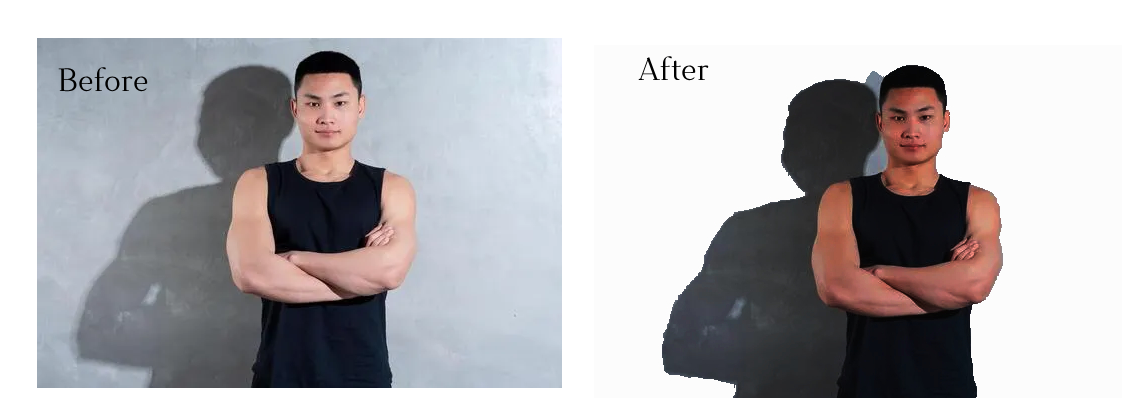
<style>
.page{position:relative;width:1141px;height:413px;background:#fcfcfc}
.page>*{position:absolute;margin:0}
.t1{font:32px "DihjautiS-Regular";color:#000000}
</style>
<div class="page">
<p class="t1" style="left:638px;top:56px;width:71px;height:25px">After</p>
<p class="t1" style="left:58px;top:67px;width:90px;height:25px">Before</p>
</div>
